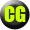
<style>
.page{position:relative;width:30px;height:30px;background:#ccff00}
.page>*{position:absolute;margin:0}
.t1{font:20px "Impact";color:#ccff00}
</style>
<div class="page">
<p class="t1" style="left:4px;top:6px;width:22px;height:16px">CG</p>
</div>
